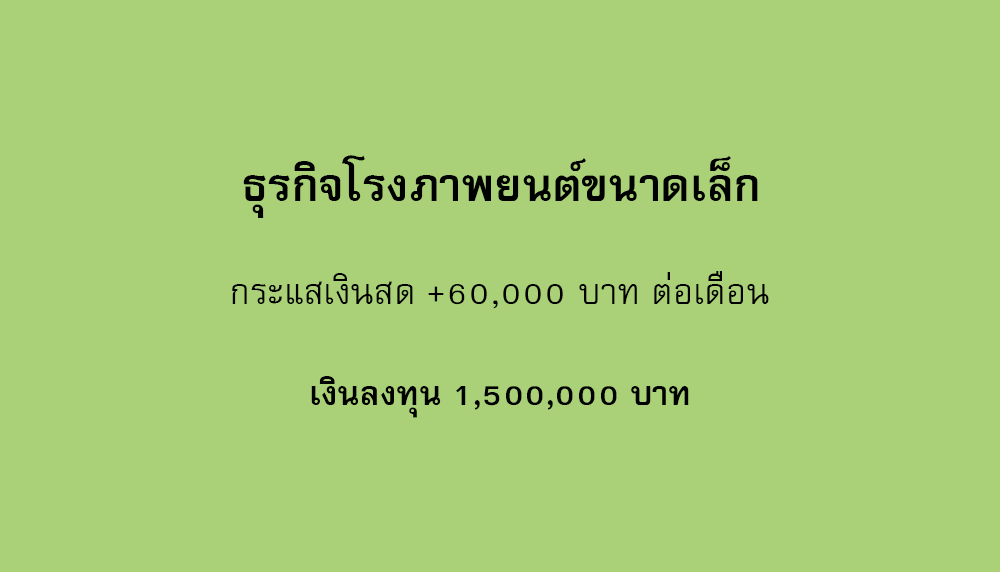
<style>
.page{position:relative;width:1000px;height:572px;background:#aad178}
.page>*{position:absolute;margin:0}
.t1{font:64px "FreesiaUPCBold";color:#000000}
.t2{font:50px "FreesiaUPC";color:#000000}
.t3{font:47px "FreesiaUPCBold";color:#000000}
</style>
<div class="page">
<p class="t1" style="left:243px;top:155px;width:515px;height:63px">ธุรกิจโรงภาพยนต์ขนาดเล็ก</p>
<p class="t2" style="left:232px;top:271px;width:537px;height:38px">กระแสเงินสด +60,000 บาท ต่อเดือน</p>
<p class="t3" style="left:311px;top:376px;width:378px;height:42px">เงินลงทุน 1,500,000 บาท</p>
</div>
